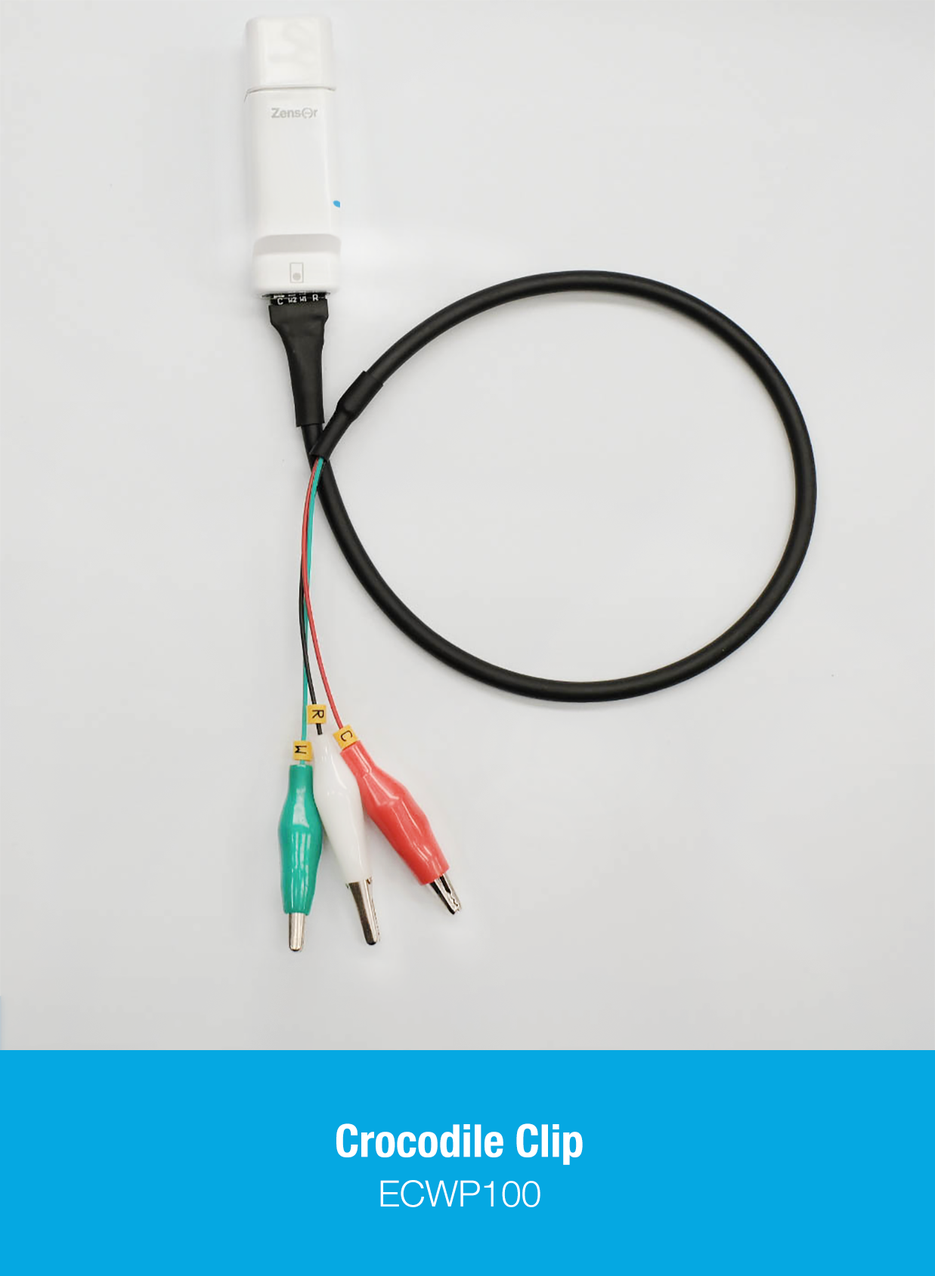
<style>
.page{position:relative;width:935px;height:1276px}
.page>*{position:absolute;margin:0}
.t1{font:45.3px "HelveticaNeue-CondensedBold";color:#ffffff}
.t2{font:36.3px "HelveticaNeue-Light";color:#ffffff}
</style>
<div class="page">
<p class="t1" style="left:336px;top:1123px;width:246px;height:42px">Crocodile Clip</p>
<p class="t2" style="left:380px;top:1180px;width:160px;height:27px">ECWP100</p>
</div>
